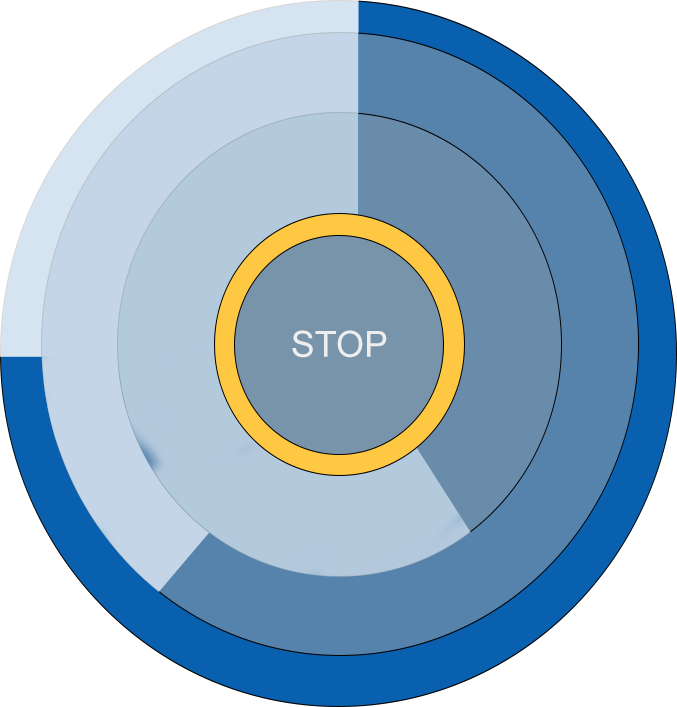
<style>
.page{position:relative;width:677px;height:707px;background:#ffffff}
.page>*{position:absolute;margin:0}
.t1{font:36px "ArialMT";color:#eeeeee}
</style>
<div class="page">
<p class="t1" style="left:292px;top:330px;width:95px;height:28px">STOP</p>
</div>
